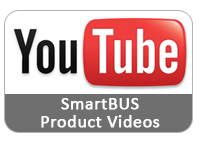
<style>
.page{position:relative;width:200px;height:141px;background:#ffffff}
.page>*{position:absolute;margin:0}
.t1{font:18px/18px "Calibri";letter-spacing:0.01em;color:#ffffff;font-weight:bold}
</style>
<div class="page">
<p class="t1" style="left:41px;top:98px;width:119px;height:30px;text-align:center">SmartBUS<br>Product Videos</p>
</div>
